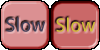
<style>
.page{position:relative;width:100px;height:50px;background:#db9092}
.page>*{position:absolute;margin:0}
.t1{font:18px "LucidaSans";color:#414058}
.t2{font:18px "LucidaSans";color:#cebe38}
</style>
<div class="page">
<p class="t1" style="left:6px;top:17px;width:39px;height:15px">Slow</p>
<p class="t2" style="left:56px;top:17px;width:39px;height:15px">Slow</p>
</div>
